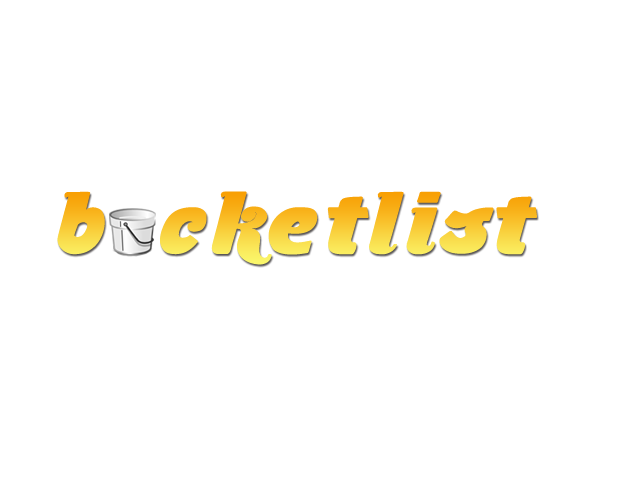
<style>
.page{position:relative;width:640px;height:480px;background:#ffffff}
.page>*{position:absolute;margin:0}
.t1{font:86px "Musa-Ornata";letter-spacing:0.065em}
</style>
<div class="page">
<p class="t1" style="left:57px;top:191px;width:480px;height:74px">b cketlist</p>
</div>
